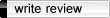
<style>
.page{position:relative;width:110px;height:18px}
.page>*{position:absolute;margin:0}
.t1{font:14px "Raavi";color:#000000}
</style>
<div class="page">
<p class="t1" style="left:14px;top:3px;width:68px;height:10px">write review</p>
</div>
